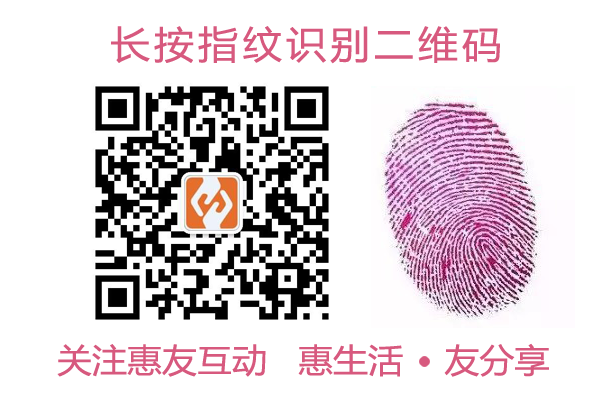
<style>
.page{position:relative;width:600px;height:400px;background:#ffffff}
.page>*{position:absolute;margin:0}
.t1{font:38px "MicrosoftYaHei";letter-spacing:0.1em;color:#d7597e;scale:1.05 1}
.t2{font:33.2px "MicrosoftYaHei";color:#d7597e;scale:1.05 1}
</style>
<div class="page">
<p class="t1" style="left:111px;top:26px;width:389px;height:38px">长按指纹识别二维码</p>
<p class="t2" style="left:57px;top:343px;width:492px;height:34px">关注惠友互动   惠生活    友分享</p>
</div>
